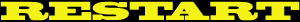
<style>
.page{position:relative;width:300px;height:22px;background:#f5f216}
.page>*{position:absolute;margin:0}
.t1{font:24px "BlackoakStd";color:#f5f216}
</style>
<div class="page">
<p class="t1" style="left:0px;top:1px;width:300px;height:20px">RESTART</p>
</div>
